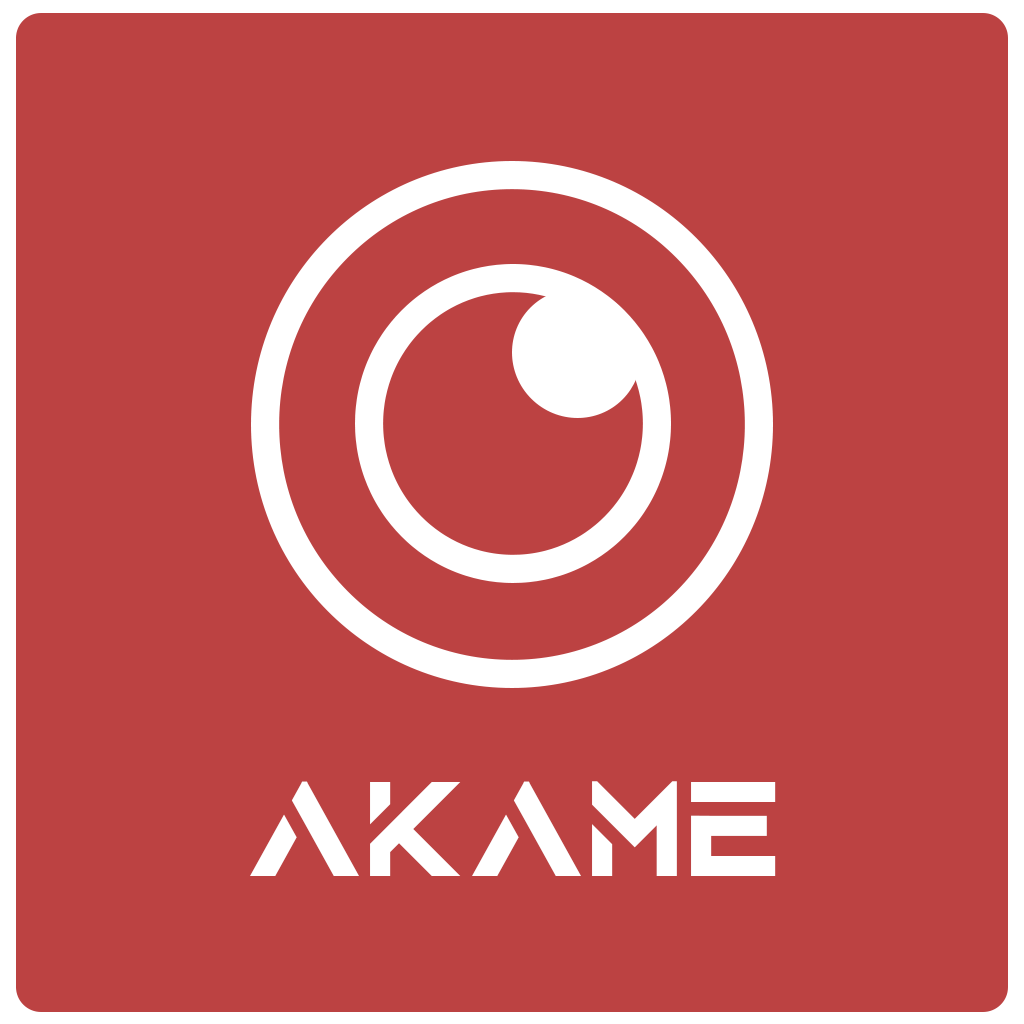
<style>
.page{position:relative;width:1024px;height:1024px;background:#bc4242}
.page>*{position:absolute;margin:0}
.t1{font:142.3px "AquireBold";color:#ffffff}
</style>
<div class="page">
<p class="t1" style="left:250px;top:781px;width:526px;height:95px">AKAME</p>
</div>
